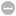
<style>
.page{position:relative;width:16px;height:16px;background:#b5b5b5}
.page>*{position:absolute;margin:0}
.t1{font:20px "KaiTi";color:#ffffff}
</style>
<div class="page">
<p class="t1" style="left:3px;top:7px;width:10px;height:3px">-</p>
</div>
